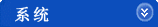
<style>
.page{position:relative;width:158px;height:27px;background:#0c4ebc}
.page>*{position:absolute;margin:0}
.t1{font:16px "SimSun";letter-spacing:0.15em;color:#ffffff;font-weight:bold}
</style>
<div class="page">
<p class="t1" style="left:15px;top:6px;width:34px;height:16px">系统</p>
</div>
